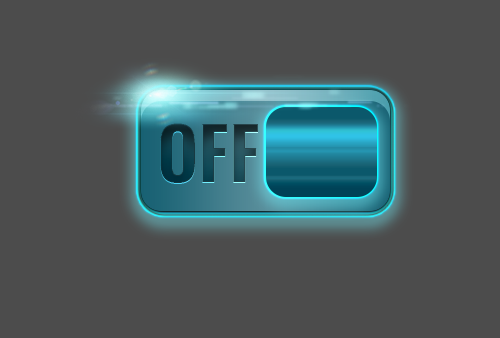
<style>
.page{position:relative;width:500px;height:338px;background:#4c4c4c}
.page>*{position:absolute;margin:0}
.t1{font:72px "Oswald-SemiBold";color:#143d47}
</style>
<div class="page">
<p class="t1" style="left:160px;top:123px;width:98px;height:60px">OFF</p>
</div>
